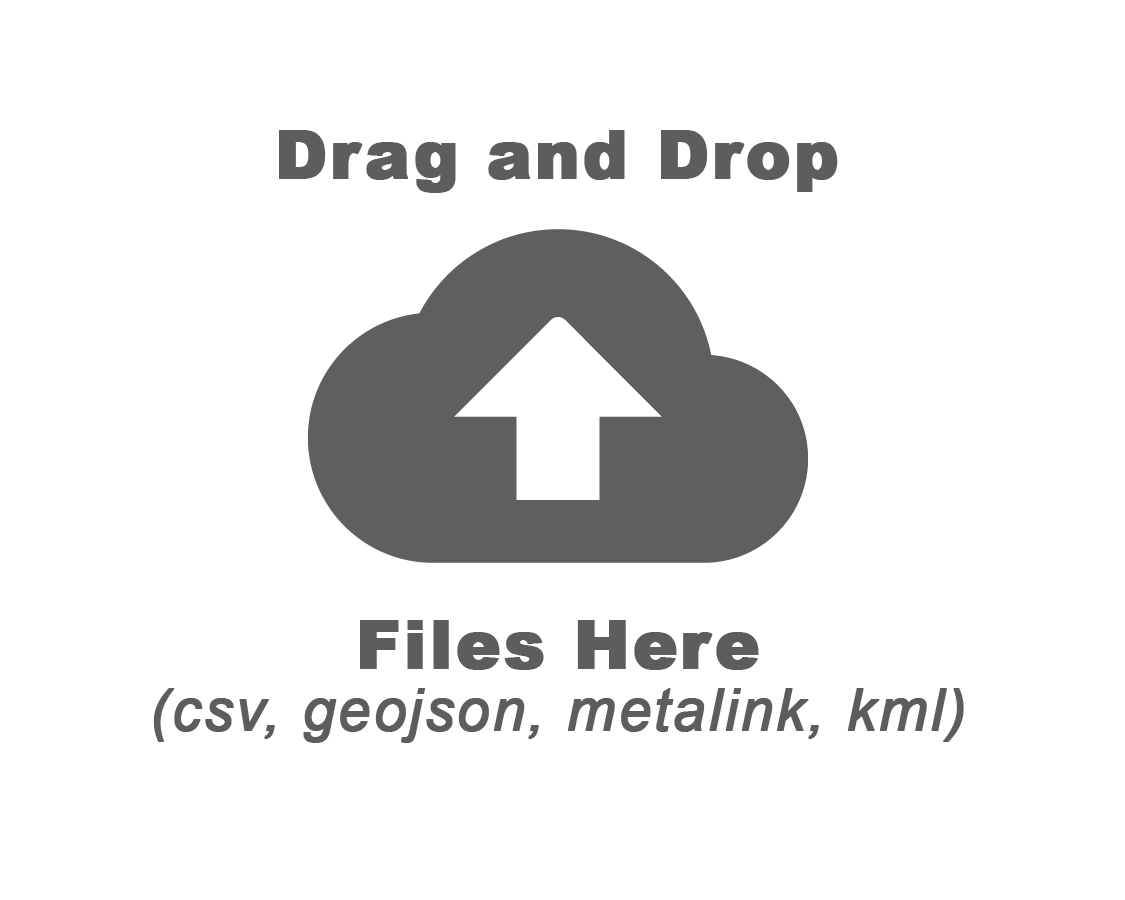
<style>
.page{position:relative;width:1125px;height:900px;background:#ffffff}
.page>*{position:absolute;margin:0}
.t1{font:66.7px "Arial-Black";letter-spacing:0.025em;color:#5e5d5d;font-weight:bold}
.t2{font:58.3px "Arial-ItalicMT";letter-spacing:0.025em;color:#5e5d5d;font-weight:bold}
</style>
<div class="page">
<p class="t1" style="left:279px;top:130px;width:559px;height:63px">Drag and Drop</p>
<p class="t1" style="left:360px;top:620px;width:399px;height:50px">Files Here</p>
<p class="t2" style="left:153px;top:688px;width:811px;height:55px">(csv, geojson, metalink, kml)</p>
</div>
